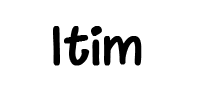
<style>
.page{position:relative;width:200px;height:100px;background:#ffffff}
.page>*{position:absolute;margin:0}
.t1{font:48px "Chinacat";color:#000000;font-weight:bold}
</style>
<div class="page">
<p class="t1" style="left:53px;top:26px;width:89px;height:40px">Itim</p>
</div>
